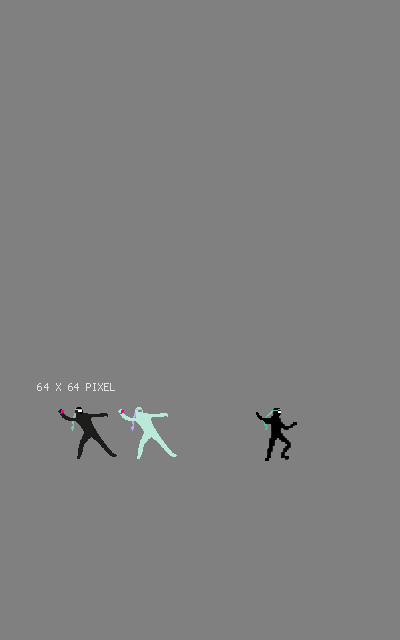
<style>
.page{position:relative;width:400px;height:640px;background:#808080}
.page>*{position:absolute;margin:0}
.t1{font:10px "Monaco";letter-spacing:0.005em;color:#e2e2e4;text-transform:uppercase}
</style>
<div class="page">
<p class="t1" style="left:37px;top:383px;width:78px;height:8px">64 x 64 pixel</p>
</div>
